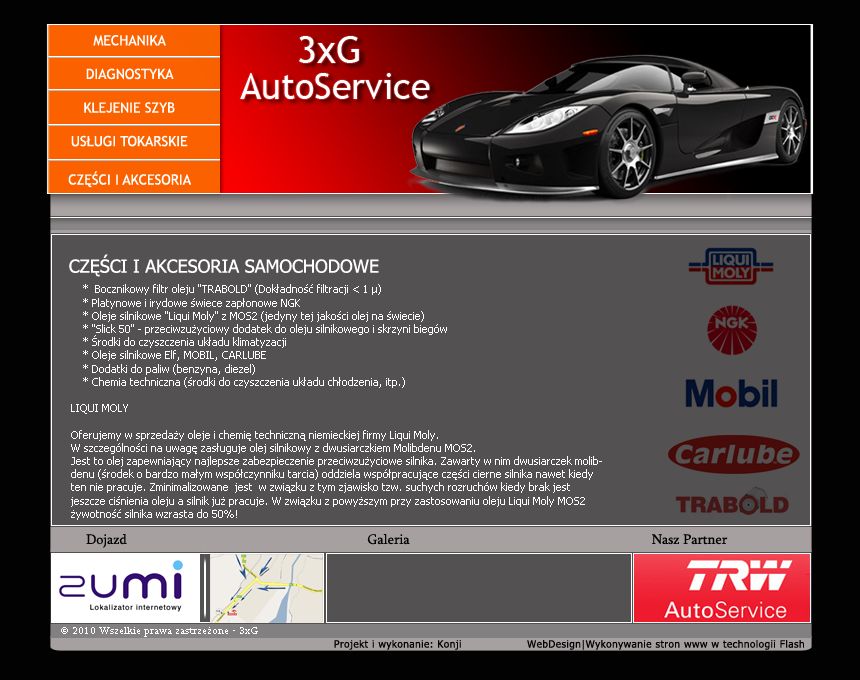
<style>
.page{position:relative;width:860px;height:680px;background:#535151}
.page>*{position:absolute;margin:0}
.t1{font:14px "TrebuchetMS";color:#ffffff}
.t2{font:14px "TrebuchetMS";color:#ffffff;text-transform:uppercase}
.t3{font:38px "TrebuchetMS";color:#ffffff}
.t4{font:36px "TrebuchetMS";color:#ffffff}
.t5{font:18px "Tahoma";color:#ffffff}
.t6{font:11px "Tahoma";color:#ffffff}
.t7{font:14px "Sylfaen";color:#000000}
.t8{font:11px "Sylfaen";color:#ffffff}
.t9{font:10px "Tahoma";letter-spacing:0.05em;color:#000000}
</style>
<div class="page">
<p class="t1" style="left:68px;top:35px;width:123px;height:153px;text-align:center">MECHANIKA<br><br>DIAGNOSTYKA<br><br>KLEJENIE SZYB<br><br>USŁUGI TOKARSKIE<br><br><span class="t2">Części i Akcesoria</span></p>
<p class="t3" style="left:299px;top:36px;width:60px;height:27px">3xG</p>
<p class="t4" style="left:240px;top:73px;width:190px;height:26px">AutoService</p>
<p class="t5" style="left:69px;top:254px;width:310px;height:23px">CZĘŚCI I AKCESORIA SAMOCHODOWE</p>
<p class="t6" style="left:71px;top:284px;width:531px;height:236px">*  Bocznikowy filtr oleju "TRABOLD" (Dokładność filtracji &lt; 1 µ)<br>    * Platynowe i irydowe świece zapłonowe NGK<br>    * Oleje silnikowe "Liqui Moly" z MOS2 (jedyny tej jakości olej na świecie)<br>    * "Slick 50" - przeciwzużyciowy dodatek do oleju silnikowego i skrzyni biegów<br>    * Środki do czyszczenia układu klimatyzacji<br>    * Oleje silnikowe Elf, MOBIL, CARLUBE<br>    * Dodatki do paliw (benzyna, diezel)<br>    * Chemia techniczna (środki do czyszczenia układu chłodzenia, itp.)<br><br>LIQUI MOLY<br><br>Oferujemy w sprzedaży oleje i chemię techniczną niemieckiej firmy Liqui Moly.<br>W szczególności na uwagę zasługuje olej silnikowy z dwusiarczkiem Molibdenu MOS2.<br>Jest to olej zapewniający najlepsze zabezpieczenie przeciwzużyciowe silnika. Zawarty w nim dwusiarczek molibdenu (środek o bardzo małym współczynniku tarcia) oddziela współpracujące części cierne silnika nawet kiedy ten nie pracuje. Zminimalizowane  jest  w związku z tym zjawisko tzw. suchych rozruchów kiedy brak jest jeszcze ciśnienia oleju a silnik już pracuje. W związku z powyższym przy zastosowaniu oleju Liqui Moly MOS2 żywotność silnika wzrasta do 50%!</p>
<p class="t7" style="left:86px;top:534px;width:41px;height:14px">Dojazd</p>
<p class="t7" style="left:367px;top:534px;width:43px;height:11px">Galeria</p>
<p class="t7" style="left:652px;top:534px;width:76px;height:11px">Nasz Partner</p>
<p class="t8" style="left:61px;top:627px;width:197px;height:10px">© 2010 Wszelkie prawa zastrzeżone - 3xG</p>
<p class="t9" style="left:334px;top:640px;width:470px;height:10px">Projekt i wykonanie: Konji                  WebDesign|Wykonywanie stron www w technologii Flash</p>
</div>
